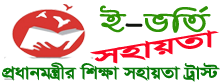
<style>
.page{position:relative;width:221px;height:82px;background:#ffffff}
.page>*{position:absolute;margin:0}
.t1{font:33.1px "SonkhoMJ-Bold";color:#2e9206;scale:1.35 1}
.t2{font:33.1px "SonkhoMJ-Bold";color:#10130f;scale:1.35 1}
.t3{font:26.1px "SutonnyMJ-Bold";color:#fa0623;scale:2 1}
.t4{font:19.9px "SutonnyMJ-Bold";color:#097909;scale:1.18 1}
</style>
<div class="page">
<p class="t1" style="left:99px;top:5px;width:112px;height:28px">B<span class="t2">-</span>fwZ©</p>
<p class="t3" style="left:90px;top:30px;width:129px;height:34px;rotate:-10deg">mnvqZv</p>
<p class="t4" style="left:2px;top:62px;width:218px;height:20px">cÖavbgš¿xi wk¶v mnvqZv Uªv÷</p>
</div>
